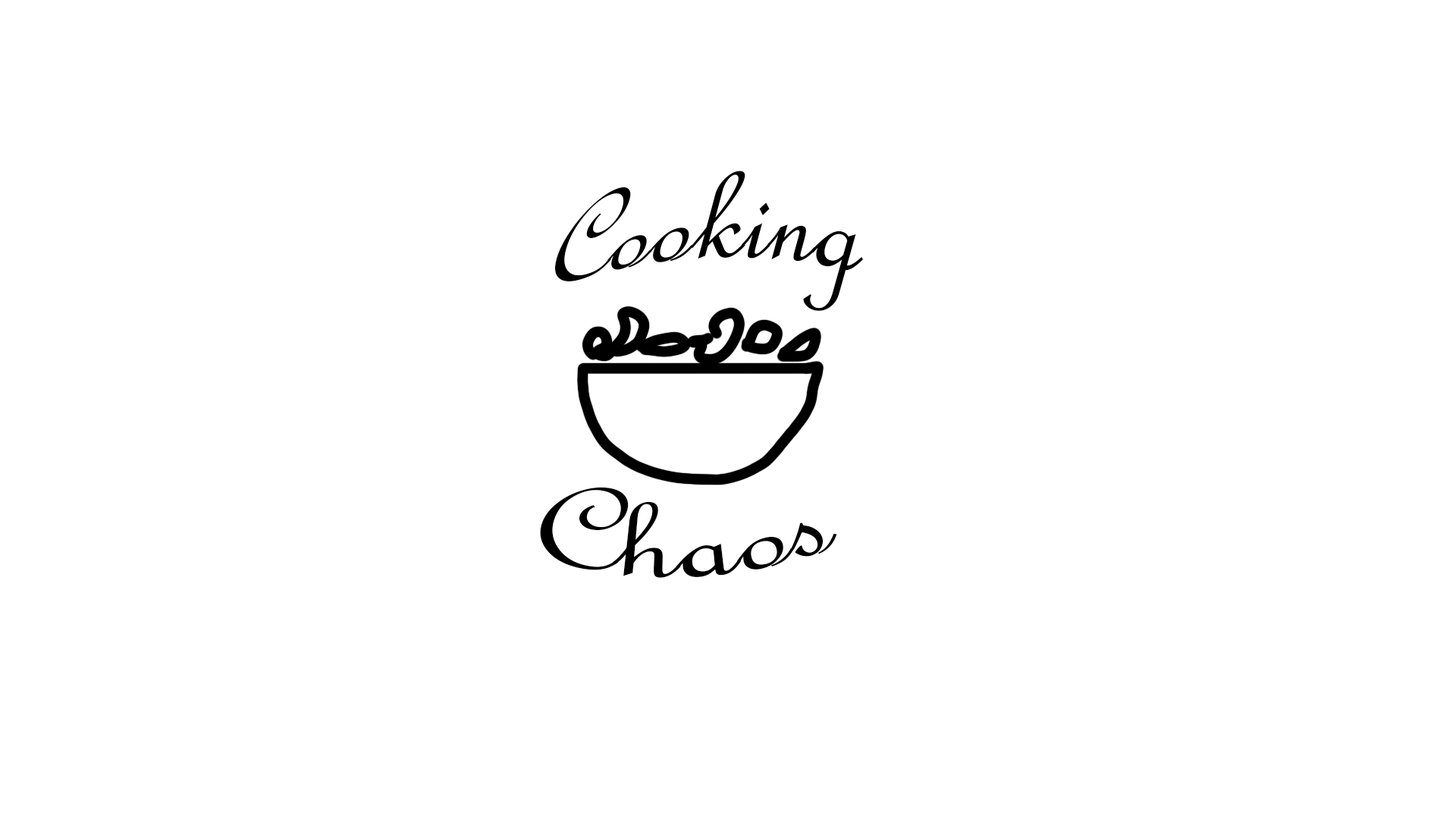
<style>
.page{position:relative;width:1456px;height:819px;background:#ffffff}
.page>*{position:absolute;margin:0}
.t1{font:126.4px "FrenchScriptMT";color:#000000}
</style>
<div class="page">
<p class="t1" style="left:554px;top:171px;width:310px;height:140px;rotate:16deg">Cooking</p>
<p class="t1" style="left:540px;top:487px;width:297px;height:91px;rotate:-26deg">Chaos</p>
</div>
